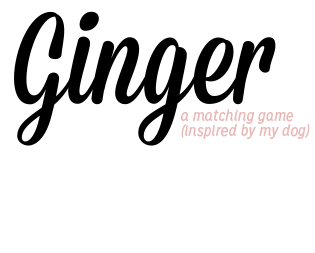
<style>
.page{position:relative;width:315px;height:253px;background:#ffffff}
.page>*{position:absolute;margin:0}
.t1{font:128.8px "Mission-Script";color:#000000}
.t2{font:15.5px/15.5px "MissionGothic-RegularItalic";color:#ebb8b8}
</style>
<div class="page">
<p class="t1" style="left:14px;top:11px;width:262px;height:135px">Ginger</p>
<p class="t2" style="left:181px;top:109px;width:129px;height:30px">a matching game <br>(inspired by my dog)</p>
</div>
